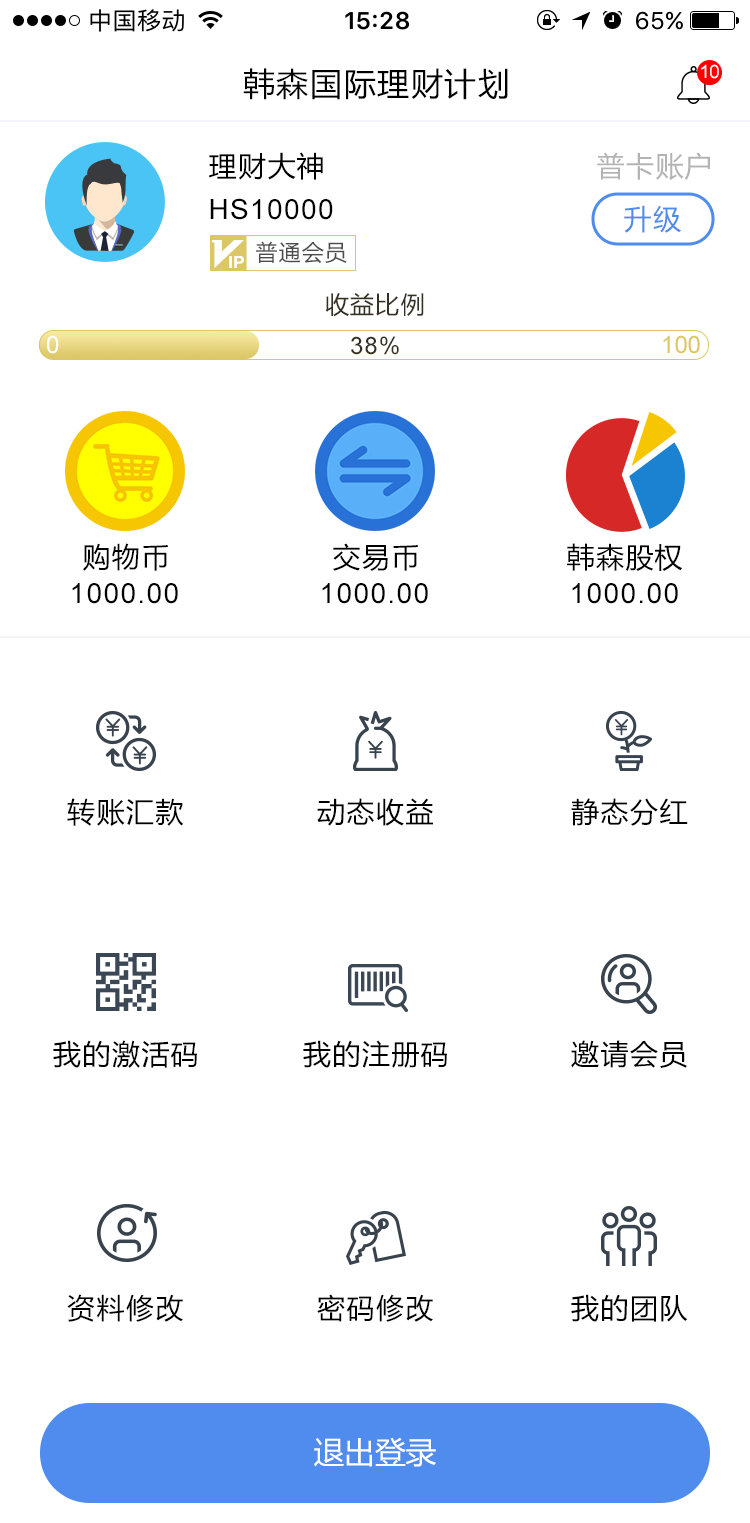
<style>
.page{position:relative;width:750px;height:1523px;background:#ffffff}
.page>*{position:absolute;margin:0}
.t1{font:18.2px "ArialMT";color:#ffffff}
.t2{font:32px "MicrosoftYaHei";letter-spacing:0.05em;color:#000000}
.t3{font:28px "MicrosoftYaHei";letter-spacing:0.05em;color:#010101}
.t4{font:28px "MicrosoftYaHei";letter-spacing:0.05em;color:#b2b2b2}
.t5{font:28px "ArialMT";letter-spacing:0.05em;color:#000000}
.t6{font:28px "MicrosoftYaHei";letter-spacing:0.05em;color:#508cee}
.t7{font:22px "MicrosoftYaHei";letter-spacing:0.05em;color:#4d4d4d}
.t8{font:24px "MicrosoftYaHei";letter-spacing:0.05em;color:#343123}
.t9{font:24px "ArialMT";letter-spacing:0.05em;color:#fefefe}
.t10{font:24px "ArialMT";letter-spacing:0.05em;color:#343123}
.t11{font:24px "ArialMT";color:#dcc766}
.t12{font:28px "ArialMT";letter-spacing:0.05em;color:#010101}
.t13{font:28px "MicrosoftYaHei";letter-spacing:0.05em;color:#000000}
.t14{font:30.7px "MicrosoftYaHei";color:#ffffff}
</style>
<div class="page">
<p class="t1" style="left:701px;top:64px;width:18px;height:15px">10</p>
<p class="t2" style="left:243px;top:68px;width:265px;height:32px">韩森国际理财计划</p>
<p class="t3" style="left:208px;top:152px;width:115px;height:28px">理财大神</p>
<p class="t4" style="left:597px;top:152px;width:113px;height:28px">普卡账户</p>
<p class="t5" style="left:210px;top:198px;width:123px;height:22px">HS10000</p>
<p class="t6" style="left:624px;top:205px;width:57px;height:28px">升级</p>
<p class="t7" style="left:256px;top:241px;width:91px;height:23px">普通会员</p>
<p class="t8" style="left:325px;top:293px;width:99px;height:24px">收益比例</p>
<p class="t9" style="left:47px;top:335px;width:12px;height:19px">0</p>
<p class="t10" style="left:351px;top:336px;width:48px;height:19px">38%</p>
<p class="t11" style="left:663px;top:335px;width:37px;height:19px">100</p>
<p class="t3" style="left:83px;top:543px;width:85px;height:28px">购物币</p>
<p class="t3" style="left:333px;top:543px;width:85px;height:28px">交易币</p>
<p class="t3" style="left:567px;top:543px;width:116px;height:28px">韩森股权</p>
<p class="t12" style="left:72px;top:583px;width:106px;height:21px">1000.00</p>
<p class="t12" style="left:322px;top:583px;width:106px;height:21px">1000.00</p>
<p class="t12" style="left:572px;top:583px;width:106px;height:21px">1000.00</p>
<p class="t13" style="left:67px;top:798px;width:117px;height:28px">转账汇款</p>
<p class="t13" style="left:317px;top:798px;width:116px;height:28px">动态收益</p>
<p class="t13" style="left:571px;top:798px;width:117px;height:28px">静态分红</p>
<p class="t13" style="left:53px;top:1040px;width:144px;height:28px">我的激活码</p>
<p class="t13" style="left:303px;top:1040px;width:144px;height:28px">我的注册码</p>
<p class="t13" style="left:571px;top:1040px;width:116px;height:28px">邀请会员</p>
<p class="t13" style="left:67px;top:1294px;width:116px;height:28px">资料修改</p>
<p class="t13" style="left:317px;top:1294px;width:116px;height:28px">密码修改</p>
<p class="t13" style="left:571px;top:1294px;width:117px;height:28px">我的团队</p>
<p class="t14" style="left:314px;top:1437px;width:122px;height:30px">退出登录</p>
</div>
